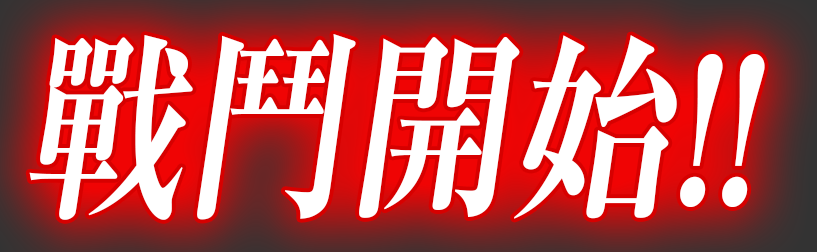
<style>
.page{position:relative;width:817px;height:252px;background:#ffffff}
.page>*{position:absolute;margin:0}
.t1{font:200px "RyuminPr6N-ExBold";color:#ffffff;font-style:italic;scale:0.81 1}
</style>
<div class="page">
<p class="t1" style="left:29px;top:34px;width:736px;height:186px">戰鬥開始!!</p>
</div>
